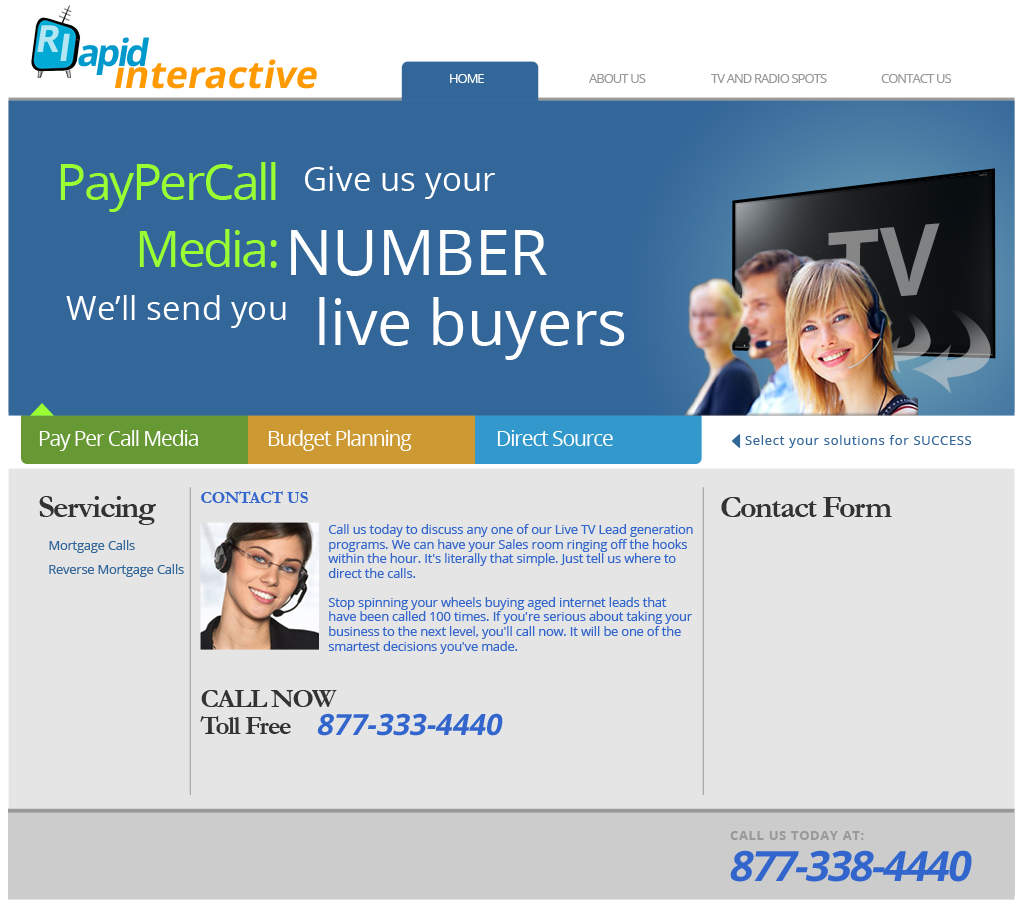
<style>
.page{position:relative;width:1024px;height:900px;background:#e5e5e5}
.page>*{position:absolute;margin:0}
.t1{font:37.6px "OpenSans-Bold";letter-spacing:-0.075em;color:#b3e6f2;font-style:italic}
.t2{font:38.1px "OpenSans-Bold";letter-spacing:-0.075em;color:#b3e6f2;font-style:italic}
.t3{font:37.6px "OpenSans-Bold";letter-spacing:-0.075em;color:#0099cc;font-style:italic}
.t4{font:37.6px "OpenSans-Bold";color:#ff9900;font-style:italic}
.t5{font:12.5px "OpenSans";letter-spacing:-0.05em;color:#ffffff}
.t6{font:12.5px "OpenSans";letter-spacing:-0.05em;color:#999999}
.t7{font:50px/66.7px "OpenSans";letter-spacing:-0.05em;color:#99ff33}
.t8{font:33.3px "OpenSans";color:#ffffff}
.t9{font:62.5px "OpenSans";color:#ffffff}
.t10{font:97.8px "OpenSans-Bold";color:#828384;scale:0.94 1}
.t11{font:20.8px "OpenSans";letter-spacing:-0.05em;color:#ffffff}
.t12{font:12.5px "OpenSans";letter-spacing:0.075em;color:#336699}
.t13{font:33.3px "Garamond-Bold";letter-spacing:-0.05em;color:#333333}
.t14{font:16.7px "Garamond-Bold";color:#3366cc}
.t15{font:32.1px "Garamond-Bold";letter-spacing:-0.05em;color:#333333}
.t16{font:12.5px/14.6px "OpenSans";color:#3366cc}
.t17{font:12.5px "OpenSans";color:#336699}
.t18{font:27.1px/27.1px "Garamond-Bold";letter-spacing:-0.05em;color:#333333}
.t19{font:29.2px "OpenSans-Bold";color:#3366cc;font-style:italic}
.t20{font:12.5px "OpenSans-Bold";letter-spacing:0.075em;color:#999999}
.t21{font:41.7px "OpenSans-Bold";letter-spacing:-0.05em;color:#3366cc;font-style:italic}
</style>
<div class="page">
<p class="t1" style="left:37px;top:25px;width:22px;height:27px">R</p>
<p class="t2" style="left:60px;top:33px;width:10px;height:28px">I</p>
<p class="t3" style="left:78px;top:37px;width:71px;height:38px">apid</p>
<p class="t4" style="left:115px;top:59px;width:202px;height:30px">interactive</p>
<p class="t5" style="left:450px;top:74px;width:34px;height:9px">HOME</p>
<p class="t6" style="left:589px;top:74px;width:57px;height:9px">ABOUT US</p>
<p class="t6" style="left:711px;top:74px;width:116px;height:9px">TV AND RADIO SPOTS</p>
<p class="t6" style="left:881px;top:74px;width:71px;height:9px">CONTACT US</p>
<p class="t7" style="left:60px;top:162px;width:217px;height:106px;text-align:right">PayPerCall<br>Media:</p>
<p class="t8" style="left:305px;top:166px;width:190px;height:33px">Give us your</p>
<p class="t9" style="left:291px;top:230px;width:256px;height:46px">NUMBER</p>
<p class="t10" style="left:828px;top:223px;width:112px;height:79px;rotate:-5deg">TV</p>
<p class="t8" style="left:66px;top:295px;width:220px;height:33px">We’ll send you</p>
<p class="t9" style="left:319px;top:297px;width:306px;height:63px">live buyers</p>
<p class="t11" style="left:39px;top:430px;width:159px;height:21px">Pay Per Call Media</p>
<p class="t11" style="left:268px;top:430px;width:144px;height:21px">Budget Planning</p>
<p class="t11" style="left:497px;top:430px;width:116px;height:16px">Direct Source</p>
<p class="t12" style="left:745px;top:435px;width:227px;height:13px">Select your solutions for SUCCESS</p>
<p class="t13" style="left:39px;top:496px;width:117px;height:29px">Servicing</p>
<p class="t14" style="left:201px;top:491px;width:107px;height:12px">CONTACT US</p>
<p class="t15" style="left:721px;top:497px;width:171px;height:20px">Contact Form</p>
<p class="t16" style="left:328px;top:524px;width:365px;height:130px">Call us today to discuss any one of our Live TV Lead generation programs. We can have your Sales room ringing off the hooks within the hour. It's literally that simple. Just tell us where to direct the calls.<br><br>Stop spinning your wheels buying aged internet leads that have been called 100 times. If you're serious about taking your business to the next level, you'll call now. It will be one of the smartest decisions you've made.</p>
<p class="t17" style="left:49px;top:540px;width:86px;height:13px">Mortgage Calls</p>
<p class="t17" style="left:49px;top:564px;width:135px;height:13px">Reverse Mortgage Calls</p>
<p class="t18" style="left:200px;top:690px;width:137px;height:44px">CALL NOW<br>Toll Free</p>
<p class="t19" style="left:317px;top:713px;width:186px;height:23px">877-333-4440</p>
<p class="t20" style="left:730px;top:831px;width:134px;height:9px">CALL US TODAY AT:</p>
<p class="t21" style="left:730px;top:850px;width:242px;height:32px">877-338-4440</p>
</div>
